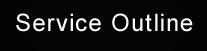
<style>
.page{position:relative;width:207px;height:51px;background:#040404}
.page>*{position:absolute;margin:0}
.t1{font:24px "ArialMT";letter-spacing:0.05em;color:#ffffff}
</style>
<div class="page">
<p class="t1" style="left:16px;top:13px;width:177px;height:19px">Service Outline</p>
</div>
